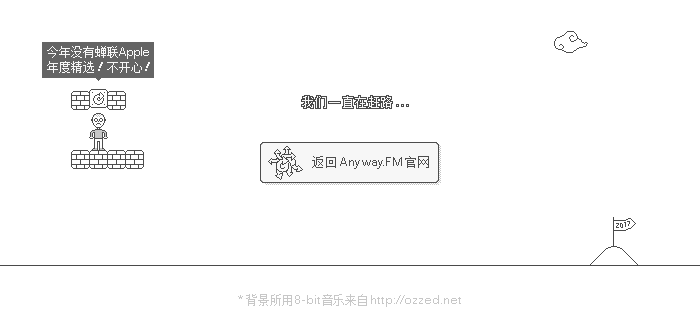
<style>
.page{position:relative;width:700px;height:326px;background:#ffffff}
.page>*{position:absolute;margin:0}
.t1{font:12px "FZXS12--GB1-0";letter-spacing:0.1em;color:#f7f7f7}
.t2{font:12px "Avenir-Book";color:#4d4d4d}
.t3{font:12px "FZXS12--GB1-0";letter-spacing:0.1em;color:#4d4d4d}
.t4{font:12px "Avenir-Book";color:#c7c7c7}
.t5{font:12px "FZXS12--GB1-0";color:#c7c7c7}
</style>
<div class="page">
<p class="t1" style="left:302px;top:96px;width:90px;height:12px">我们一直在赶路</p>
<p class="t2" style="left:312px;top:156px;width:117px;height:13px"><span class="t3">返回</span>Anyway.FM<span class="t3">官网</span></p>
<p class="t4" style="left:238px;top:294px;width:223px;height:13px">* <span class="t5">背景所用</span>8-bit<span class="t5">音乐来自</span>http://ozzed.net</p>
</div>
